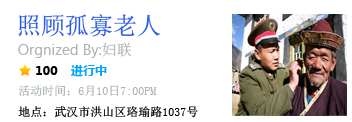
<style>
.page{position:relative;width:352px;height:122px;background:#ffffff}
.page>*{position:absolute;margin:0}
.t1{font:24px "SimSun";color:#2959e7}
.t2{font:15px "SegoeUI";color:#adb6b5}
.t3{font:15px "SimSun";color:#adb6b5}
.t4{font:12px "MicrosoftYaHei-Bold";color:#00a2ff}
.t5{font:12px "MicrosoftYaHei-Bold";color:#000000}
.t6{font:12px "SimSun";color:#000000}
.t7{font:12px "SimSun";color:#adb6b5}
</style>
<div class="page">
<p class="t1" style="left:18px;top:14px;width:142px;height:23px">照顾孤寡老人</p>
<p class="t2" style="left:18px;top:42px;width:114px;height:16px">Orgnized By:<span class="t3">妇联</span></p>
<p class="t4" style="left:71px;top:64px;width:36px;height:13px">进行中</p>
<p class="t5" style="left:36px;top:66px;width:22px;height:9px">100</p>
<p class="t6" style="left:18px;top:85px;width:180px;height:33px"><span class="t7"><br>活动时间：6月10日7:00PM<br></span>地点：武汉市洪山区珞瑜路1037号</p>
</div>
